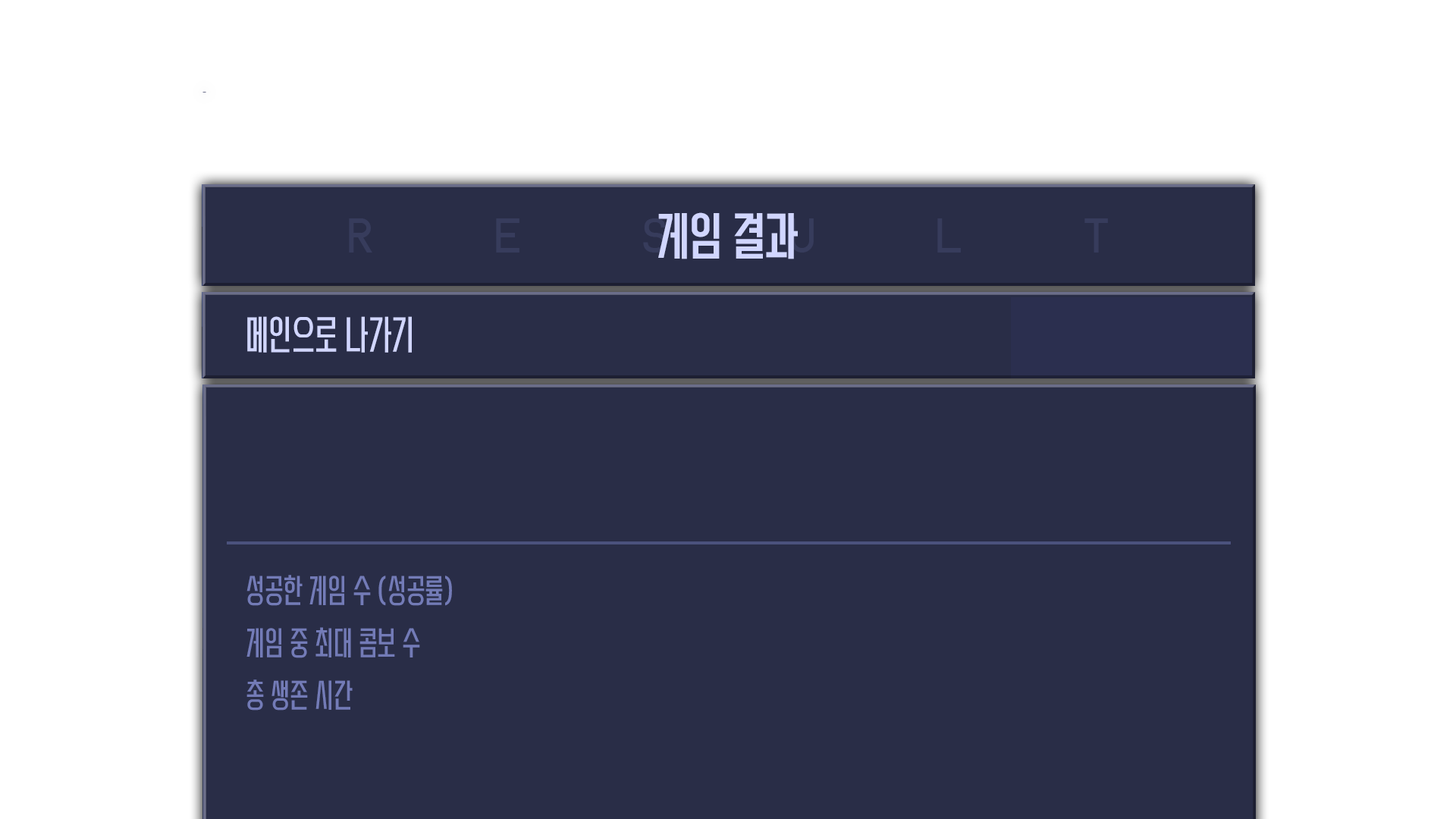
<style>
.page{position:relative;width:1456px;height:819px;background:#292d47}
.page>*{position:absolute;margin:0}
.t1{font:53.1px "beanpoleotB";color:#d1d6ff}
.t2{font:41.7px "beanpoleotM";color:#d1d6ff}
.t3{font:34.1px "beanpoleotM";color:#737bb7}
</style>
<div class="page">
<p class="t1" style="left:658px;top:212px;width:140px;height:47px">게임 결과</p>
<p class="t2" style="left:247px;top:316px;width:165px;height:37px">메인으로 나가기</p>
<p class="t3" style="left:246px;top:575px;width:206px;height:31px">성공한 게임 수 (성공률)</p>
<p class="t3" style="left:246px;top:627px;width:174px;height:31px">게임 중 최대 콤보 수</p>
<p class="t3" style="left:246px;top:679px;width:107px;height:32px">총 생존 시간</p>
</div>
